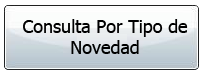
<style>
.page{position:relative;width:206px;height:78px;background:#ffffff}
.page>*{position:absolute;margin:0}
.t1{font:18px "Tahoma";color:#000000}
</style>
<div class="page">
<p class="t1" style="left:23px;top:19px;width:165px;height:35px;text-align:center">Consulta Por Tipo de Novedad</p>
</div>
